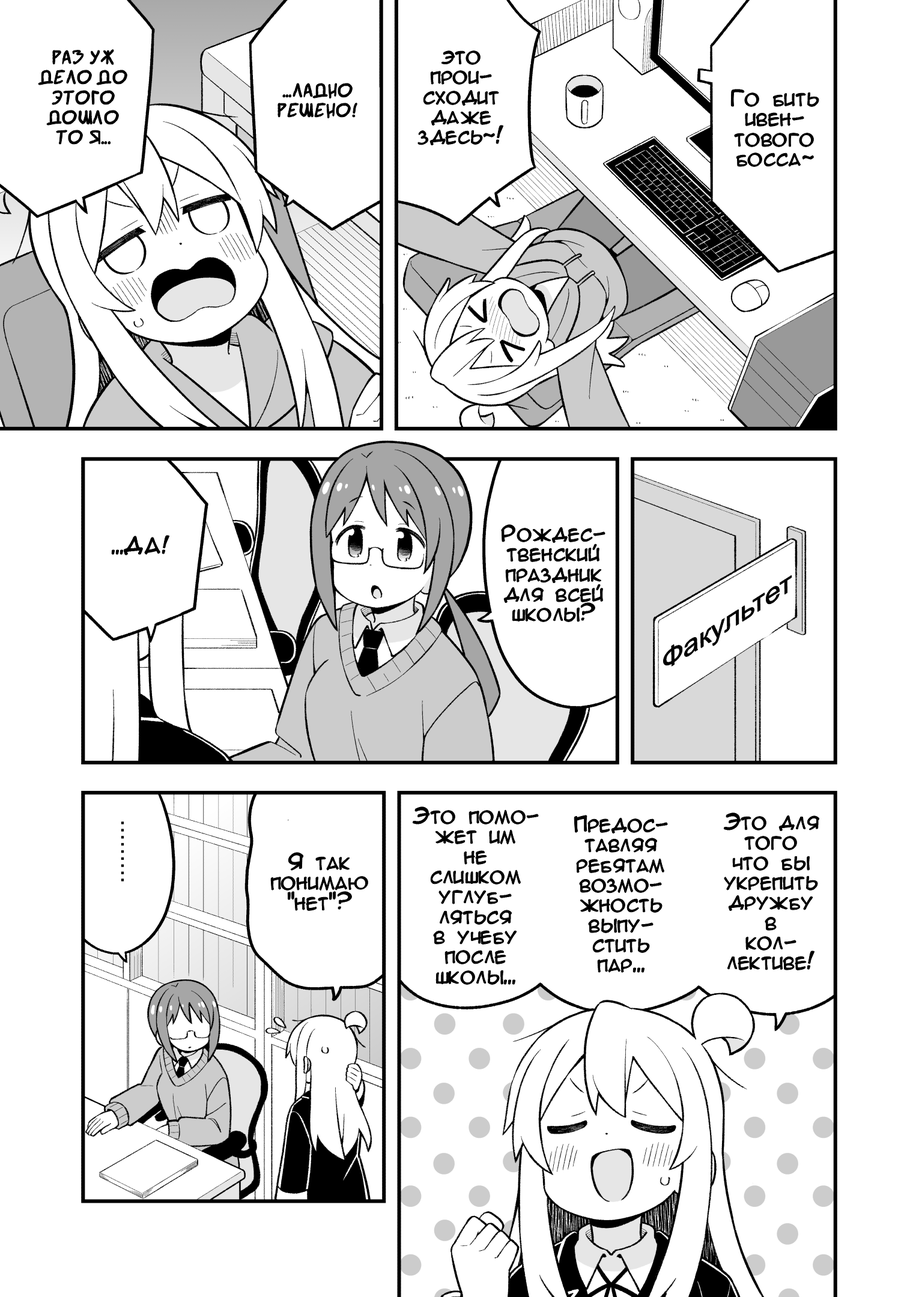
<style>
.page{position:relative;width:919px;height:1297px;background:#ffffff}
.page>*{position:absolute;margin:0}
.t1{font:20px/20px "SuperWebcomicBros.Rusbyyakustick";color:#000000}
.t2{font:20px/20px "AnimeAcev3";color:#000000}
.t3{font:20px "AnimeAcev3";color:#000000}
.t4{font:27.7px "ArialMT";color:#000000;scale:1.18 1}
</style>
<div class="page">
<p class="t1" style="left:38px;top:49px;width:89px;height:95px;text-align:center">раз уж<br>дело до<br>этого<br>дошло<br>то я...</p>
<p class="t2" style="left:418px;top:50px;width:85px;height:95px;text-align:center">это<br>прои-<br>сходит<br>даже<br>здесь~!</p>
<p class="t1" style="left:278px;top:83px;width:79px;height:35px;text-align:center">...ладно<br>решено!</p>
<p class="t2" style="left:731px;top:90px;width:88px;height:77px;text-align:center">Го бить<br>ивен-<br>тового<br>босса~</p>
<p class="t2" style="left:502px;top:525px;width:103px;height:97px;text-align:center">Рождес-<br>твенский<br>праздник<br>для всей<br>школы?</p>
<p class="t3" style="left:112px;top:536px;width:57px;height:19px">...ДА!</p>
<p class="t4" style="left:663px;top:575px;width:129px;height:92px;rotate:-32deg">Факультет</p>
<p class="t2" style="left:413px;top:807px;width:125px;height:178px;text-align:center">Это помо-<br>жет им<br>не<br>слишком<br>углуб-<br>ляться<br>в учебу<br>после<br>школы...</p>
<p class="t2" style="left:574px;top:816px;width:93px;height:157px;text-align:center">Предос-<br>тавляя<br>ребятам<br>возмо-<br>жность<br>выпу-<br>стить<br>пар...</p>
<p class="t2" style="left:724px;top:813px;width:95px;height:158px;text-align:center">Это для<br>того<br>что бы<br>укрепить<br>дружбу<br>в<br>кол-<br>лективе!</p>
<p class="t2" style="left:271px;top:853px;width:97px;height:58px;text-align:center">Я так<br>понимаю<br>"нет"?</p>
</div>
